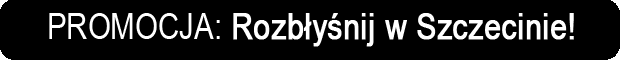
<style>
.page{position:relative;width:620px;height:60px;background:#000000}
.page>*{position:absolute;margin:0}
.t1{font:36px "ArialNarrow";color:#ffffff;font-weight:bold}
.t2{font:36px "ArialNarrow";color:#ffffff}
</style>
<div class="page">
<p class="t1" style="left:49px;top:13px;width:525px;height:34px"><span class="t2">PROMOCJA:</span> Rozbłyśnij w Szczecinie!</p>
</div>
